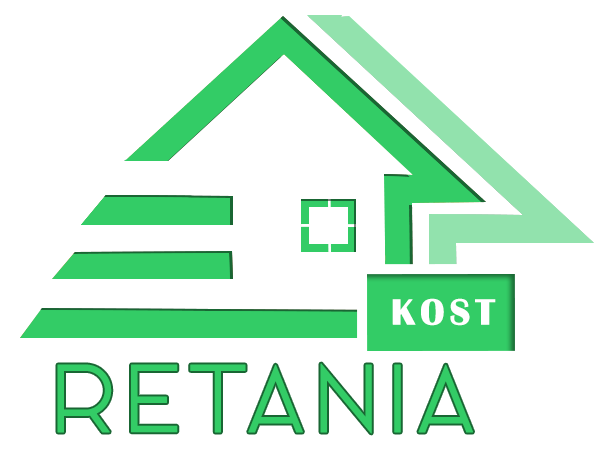
<style>
.page{position:relative;width:609px;height:462px;background:#ffffff}
.page>*{position:absolute;margin:0}
.t1{font:37.5px "BritannicBold";letter-spacing:0.12em;color:#ffffff;text-transform:uppercase;font-weight:bold}
.t2{font:95.8px "PergolaDemo";letter-spacing:0.12em;color:#33cc66;text-transform:uppercase;font-weight:bold}
</style>
<div class="page">
<p class="t1" style="left:392px;top:298px;width:104px;height:28px">kost</p>
<p class="t2" style="left:57px;top:363px;width:416px;height:71px">retania</p>
</div>
